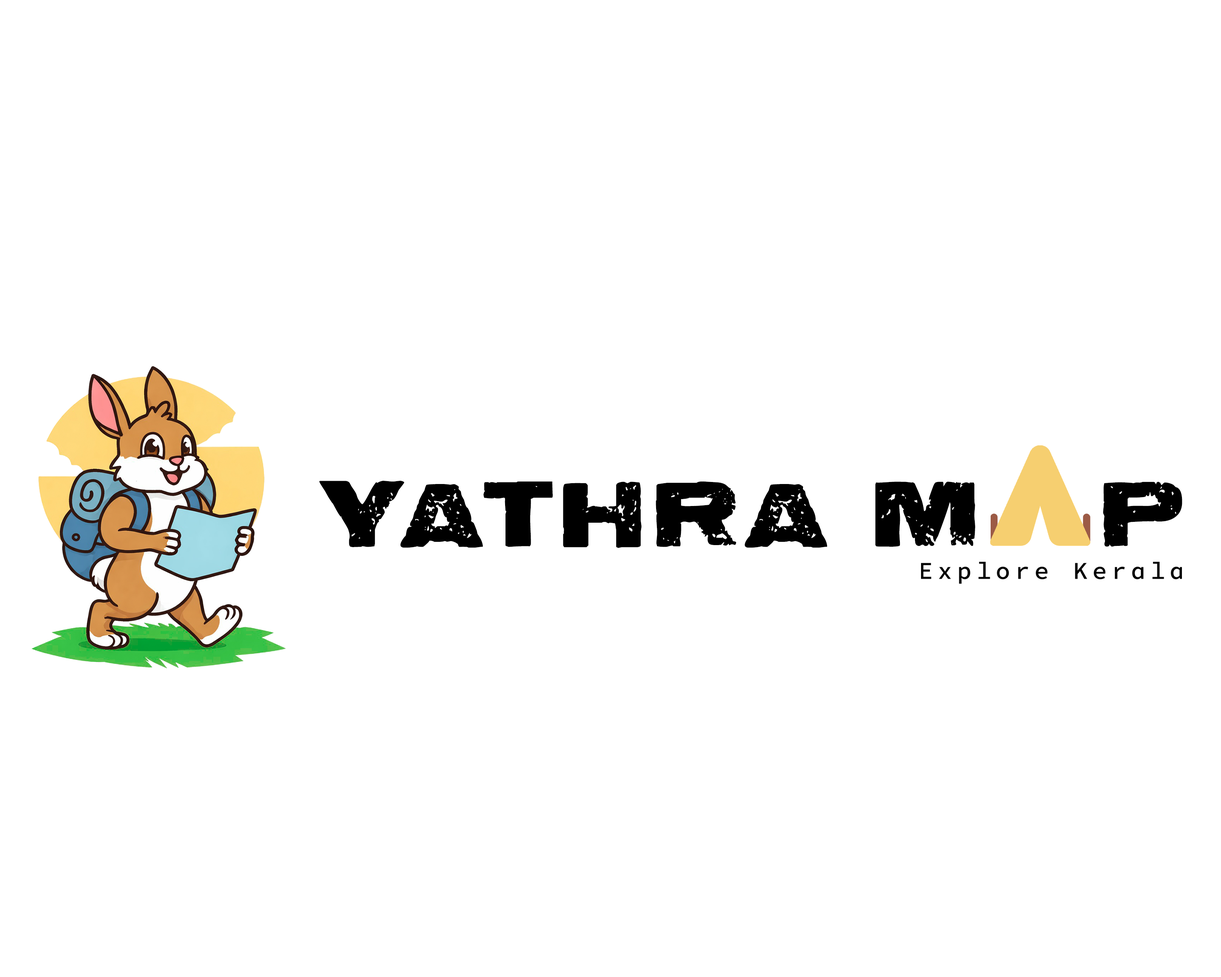
<style>
.page{position:relative;width:1221px;height:977px;background:#ffffff}
.page>*{position:absolute;margin:0}
.t1{font:80.5px "LetterpressAurora";letter-spacing:0.07em;color:#000000}
.t2{font:24.2px "SourceCodePro-Medium";letter-spacing:0.2em;color:#010101}
</style>
<div class="page">
<p class="t1" style="left:319px;top:481px;width:863px;height:67px">YATHRA M   P</p>
<p class="t2" style="left:921px;top:562px;width:261px;height:22px">Explore Kerala</p>
</div>
